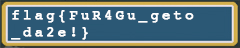
<style>
.page{position:relative;width:240px;height:48px;background:#2b5875}
.page>*{position:absolute;margin:0}
.t1{font:14px/17px "Courier";letter-spacing:0.2em;color:#ffffff;font-weight:bold}
</style>
<div class="page">
<p class="t1" style="left:11px;top:10px;width:183px;height:30px">flag{FuR4Gu_geto<br>_da2e!}</p>
</div>
